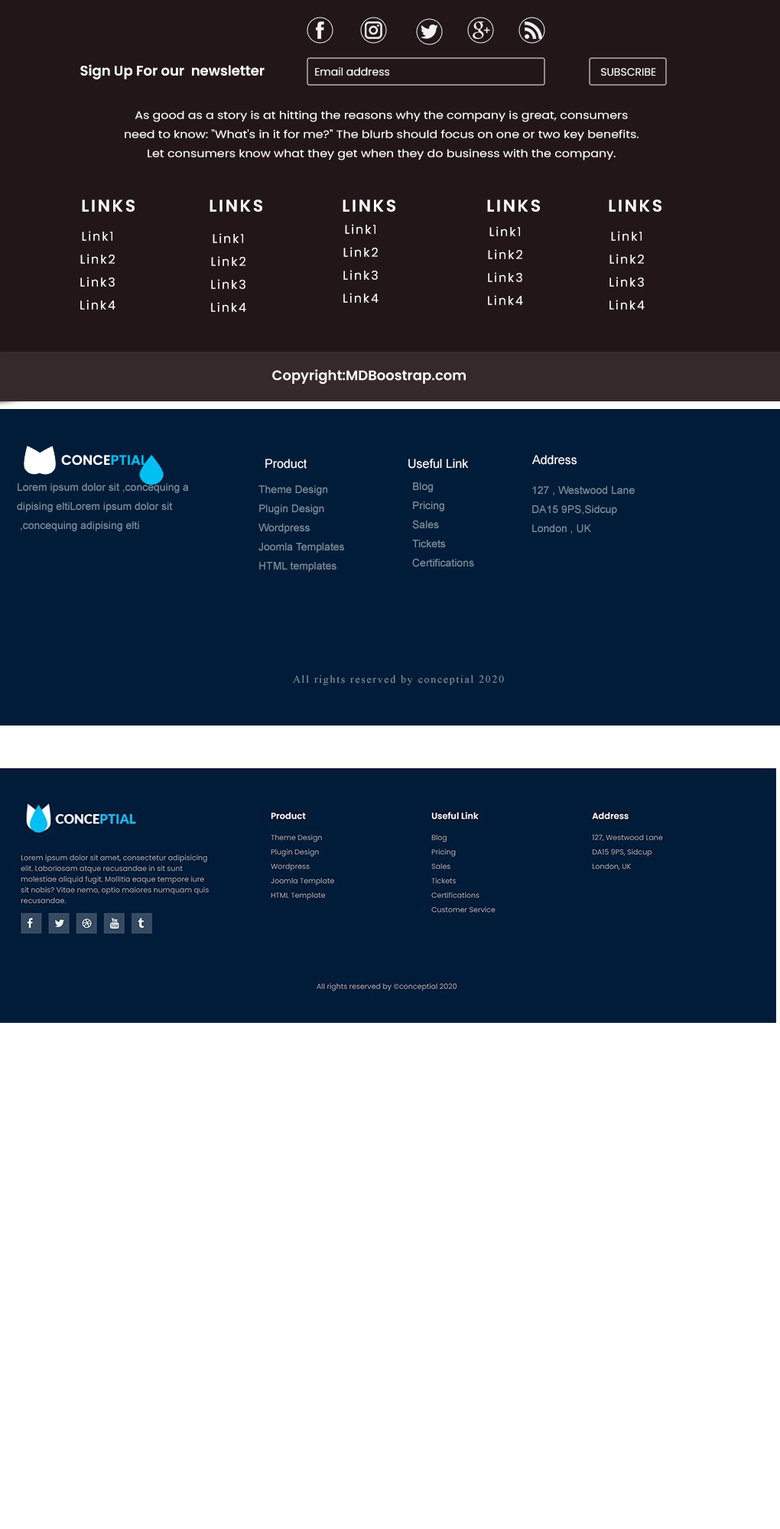
<style>
.page{position:relative;width:780px;height:1529px;background:#ffffff}
.page>*{position:absolute;margin:0}
.t1{font:13.8px "Poppins-SemiBold";color:#ffffff}
.t2{font:10.7px "Poppins-Regular";color:#ffffff}
.t3{font:10.7px/19.1px "Poppins-Regular";color:#ffffff;scale:1.14 1}
.t4{font:16.8px "Poppins-SemiBold";letter-spacing:0.12em;color:#ffffff}
.t5{font:12.2px/22.9px "Poppins-Regular";letter-spacing:0.12em;color:#ffffff}
.t6{font:13.8px "Poppins-SemiBold";color:#01bff3}
.t7{font:12.2px "ArialMT";color:#ffffff}
.t8{font:10.7px/19.1px "ArialMT";color:#7f909d}
.t9{font:10.7px "TimesNewRomanPSMT";letter-spacing:0.12em;color:#7f909d}
</style>
<div class="page">
<p class="t1" style="left:80px;top:64px;width:185px;height:16px">Sign Up For our  newsletter</p>
<p class="t2" style="left:315px;top:67px;width:74px;height:9px">Email address</p>
<p class="t2" style="left:601px;top:68px;width:55px;height:8px">SUBSCRIBE</p>
<p class="t3" style="left:125px;top:110px;width:513px;height:51px;text-align:center">As good as a story is at hitting the reasons why the company is great, consumers<br> need to know: "What's in it for me?" The blurb should focus on one or two key benefits. <br>Let consumers know what they get when they do business with the company.</p>
<p class="t4" style="left:82px;top:200px;width:53px;height:12px">LINKS</p>
<p class="t4" style="left:209px;top:200px;width:53px;height:12px">LINKS</p>
<p class="t4" style="left:343px;top:200px;width:52px;height:12px">LINKS</p>
<p class="t4" style="left:487px;top:200px;width:53px;height:12px">LINKS</p>
<p class="t4" style="left:609px;top:200px;width:52px;height:12px">LINKS</p>
<p class="t5" style="left:80px;top:231px;width:35px;height:79px;text-align:center">Link1<br>Link2<br>Link3<br>Link4</p>
<p class="t5" style="left:211px;top:233px;width:35px;height:79px;text-align:center">Link1<br>Link2<br>Link3<br>Link4</p>
<p class="t5" style="left:343px;top:224px;width:35px;height:79px;text-align:center">Link1<br>Link2<br>Link3<br>Link4</p>
<p class="t5" style="left:488px;top:226px;width:35px;height:79px;text-align:center">Link1<br>Link2<br>Link3<br>Link4</p>
<p class="t5" style="left:609px;top:231px;width:36px;height:79px;text-align:center">Link1<br>Link2<br>Link3<br>Link4</p>
<p class="t1" style="left:61px;top:455px;width:86px;height:10px">CONCE<span class="t6">PTIAL</span></p>
<p class="t7" style="left:265px;top:459px;width:42px;height:10px">Product</p>
<p class="t7" style="left:408px;top:459px;width:61px;height:10px">Useful Link</p>
<p class="t7" style="left:532px;top:455px;width:44px;height:10px">Address</p>
<p class="t8" style="left:17px;top:483px;width:172px;height:48px">Lorem ipsum dolor sit ,concequing a<br>dipising eltiLorem ipsum dolor sit<br> ,concequing adipising elti</p>
<p class="t8" style="left:258px;top:485px;width:86px;height:87px">Theme Design <br>Plugin Design<br>Wordpress<br>Joomla Templates<br>HTML templates</p>
<p class="t8" style="left:412px;top:482px;width:62px;height:85px">Blog<br>Pricing<br>Sales<br>Tickets<br>Certifications</p>
<p class="t8" style="left:532px;top:486px;width:103px;height:48px">127 , Westwood Lane <br>DA15 9PS,Sidcup<br>London , UK</p>
<p class="t9" style="left:293px;top:675px;width:211px;height:10px">All rights reserved by conceptial 2020</p>
</div>
